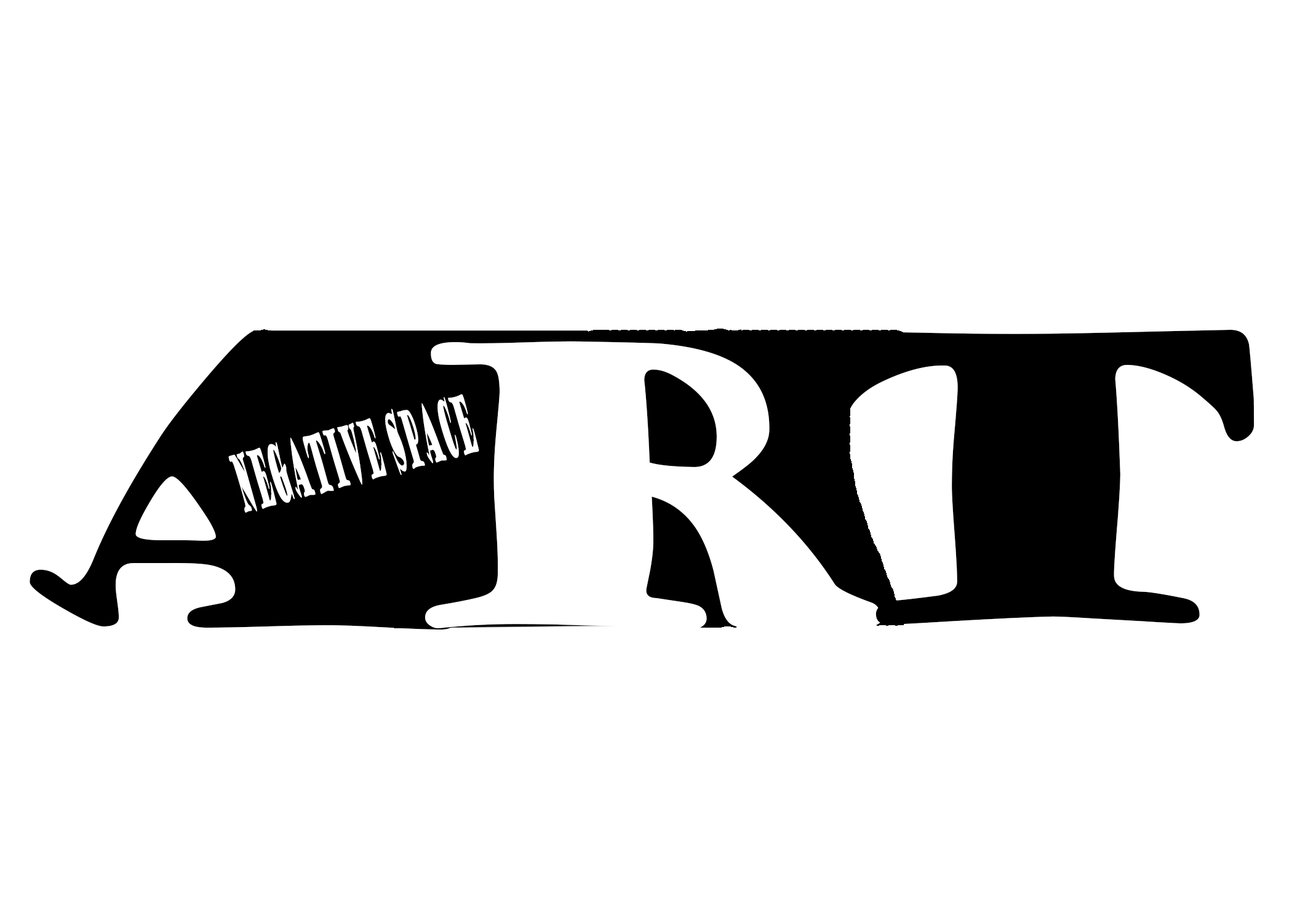
<style>
.page{position:relative;width:1292px;height:923px;background:#ffffff}
.page>*{position:absolute;margin:0}
.t1{font:384.5px "GoudyStout";color:#000000}
.t2{font:384.5px "GoudyStout";color:#ffffff}
.t3{font:78.8px "GoudyStout";color:#ffffff;scale:0.2 1}
</style>
<div class="page">
<p class="t1" style="left:815px;top:330px;width:440px;height:294px">T</p>
<p class="t1" style="left:30px;top:330px;width:428px;height:299px">A</p>
<p class="t2" style="left:425px;top:341px;width:457px;height:288px">R</p>
<p class="t3" style="left:228px;top:394px;width:251px;height:119px;rotate:-15deg">Negative space</p>
</div>
